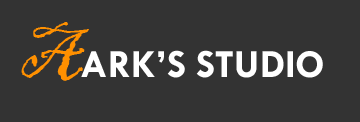
<style>
.page{position:relative;width:360px;height:122px;background:#333333}
.page>*{position:absolute;margin:0}
.t1{font:40px "TwCenMT-Bold";color:#ffffff}
.t2{font:72px "BlackadderITC-Regular";color:#ff9000}
</style>
<div class="page">
<p class="t1" style="left:21px;top:22px;width:302px;height:59px"><span class="t2">A</span>ARK’S STUDIO</p>
</div>
